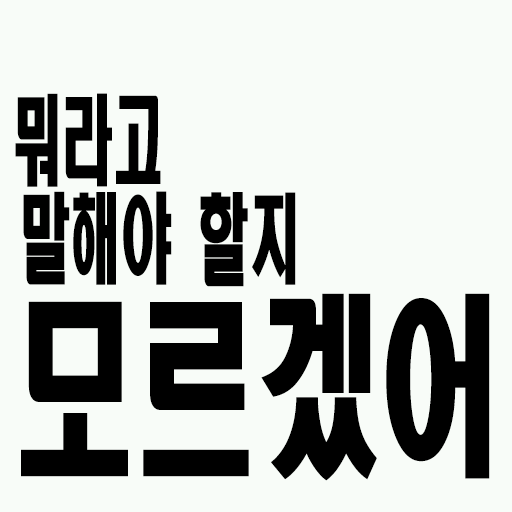
<style>
.page{position:relative;width:512px;height:512px;background:#f8fcf8}
.page>*{position:absolute;margin:0}
.t1{font:96.9px "HeadlineR-HM";color:#000000;scale:0.53 1}
.t2{font:191.9px "HeadlineR-HM";color:#000000;scale:0.63 1}
</style>
<div class="page">
<p class="t1" style="left:15px;top:93px;width:146px;height:94px">뭐라고</p>
<p class="t1" style="left:23px;top:191px;width:273px;height:96px">말해야 할지</p>
<p class="t2" style="left:21px;top:293px;width:469px;height:188px">모르겠어</p>
</div>
